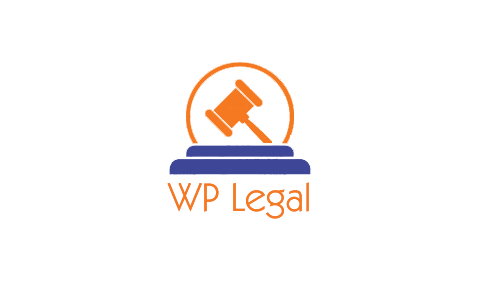
<style>
.page{position:relative;width:480px;height:290px;background:#ffffff}
.page>*{position:absolute;margin:0}
.t1{font:40px "KabelITCbyBT-Book";color:#f47920}
</style>
<div class="page">
<p class="t1" style="left:167px;top:182px;width:142px;height:37px">WP Legal</p>
<p class="t1" style="left:167px;top:182px;width:142px;height:37px">WP Legal</p>
</div>
